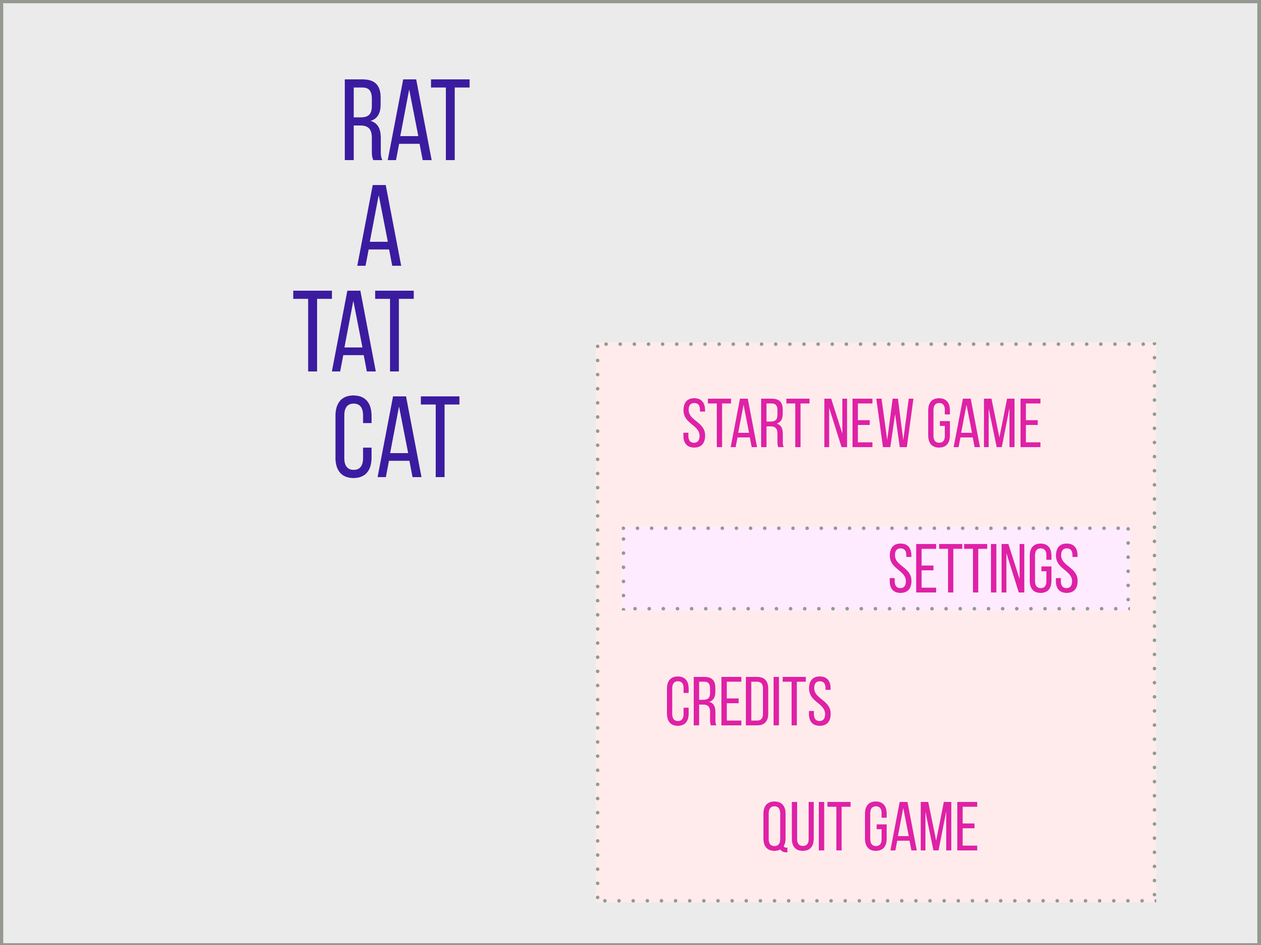
<style>
.page{position:relative;width:1261px;height:945px;background:#ebebeb}
.page>*{position:absolute;margin:0}
.t1{font:115.4px "BebasNeueRegular";color:#3b1ca0}
.t2{font:69.2px "BebasNeueRegular";color:#df21a7}
</style>
<div class="page">
<p class="t1" style="left:345px;top:79px;width:125px;height:81px">Rat</p>
<p class="t1" style="left:357px;top:185px;width:45px;height:81px">A</p>
<p class="t1" style="left:293px;top:291px;width:121px;height:81px">Tat</p>
<p class="t1" style="left:335px;top:396px;width:125px;height:82px">Cat</p>
<p class="t2" style="left:683px;top:398px;width:358px;height:50px">Start New Game</p>
<p class="t2" style="left:890px;top:543px;width:188px;height:50px">Settings</p>
<p class="t2" style="left:667px;top:676px;width:164px;height:50px">Credits</p>
<p class="t2" style="left:764px;top:802px;width:214px;height:51px">Quit Game</p>
</div>
